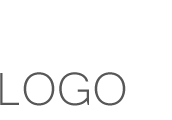
<style>
.page{position:relative;width:172px;height:120px;background:#ffffff}
.page>*{position:absolute;margin:0}
.t1{font:60px "Microsoft-Yi-Baiti";color:#575757}
</style>
<div class="page">
<p class="t1" style="left:0px;top:72px;width:126px;height:34px">LOGO</p>
</div>
